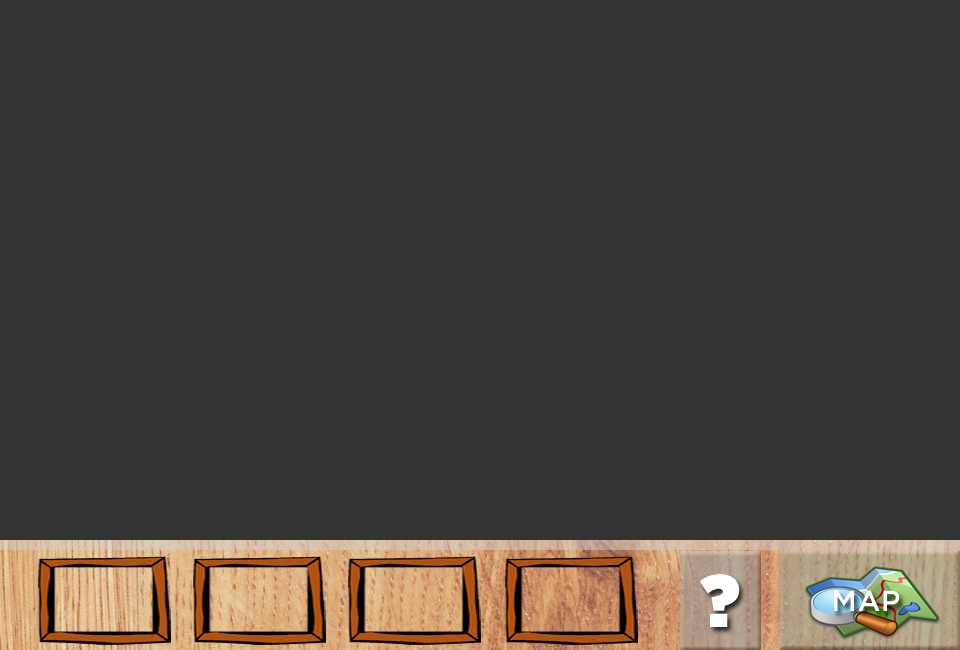
<style>
.page{position:relative;width:960px;height:650px;background:#333333}
.page>*{position:absolute;margin:0}
.t1{font:74.2px "Gotham-Ultra";letter-spacing:0.025em;color:#ffffff}
.t2{font:28.8px "Gotham-Medium";letter-spacing:0.025em;color:#ffffff}
</style>
<div class="page">
<p class="t1" style="left:699px;top:574px;width:41px;height:53px">?</p>
<p class="t2" style="left:834px;top:590px;width:66px;height:21px">MAP</p>
</div>
